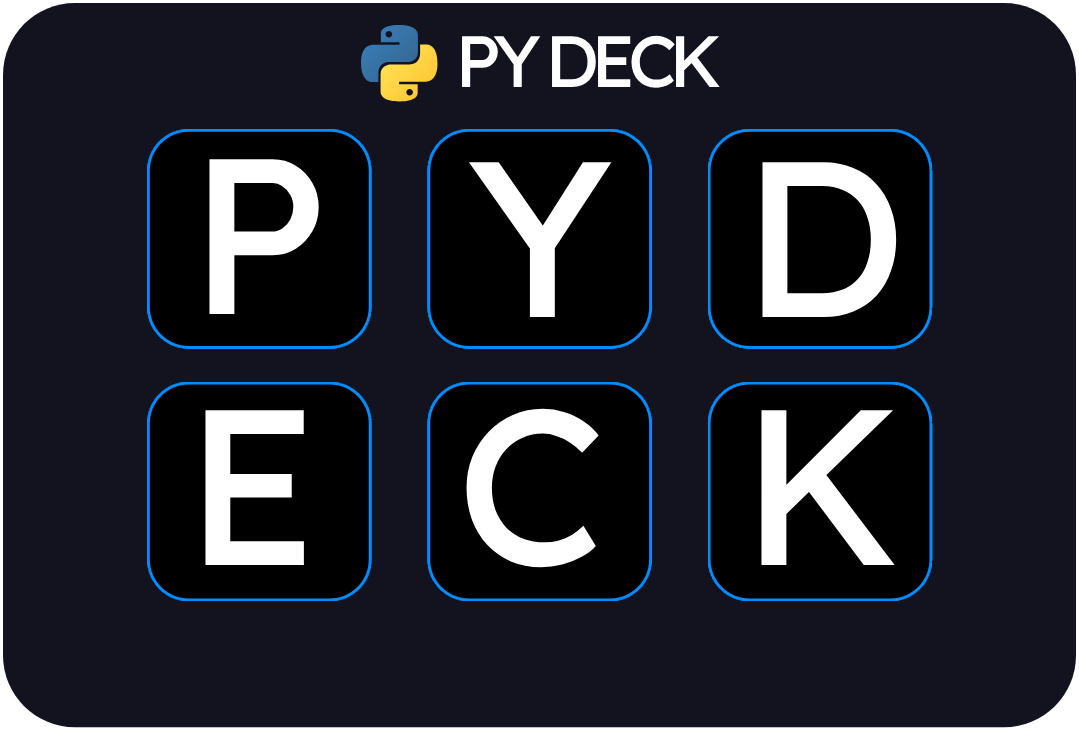
<style>
.page{position:relative;width:1079px;height:730px;background:#13131f}
.page>*{position:absolute;margin:0}
.t1{font:72.4px "LexendDeca-Regular_421.000wght";letter-spacing:-0.111em;color:#ffffff}
.t2{font:221px "LexendDeca-Regular_421.000wght";letter-spacing:-0.111em;color:#ffffff}
</style>
<div class="page">
<p class="t1" style="left:462px;top:35px;width:258px;height:53px">PY DECK</p>
<p class="t2" style="left:209px;top:159px;width:110px;height:155px">P</p>
<p class="t2" style="left:469px;top:162px;width:143px;height:155px">Y</p>
<p class="t2" style="left:762px;top:162px;width:135px;height:155px">D</p>
<p class="t2" style="left:205px;top:410px;width:99px;height:155px">E</p>
<p class="t2" style="left:466px;top:408px;width:133px;height:160px">C</p>
<p class="t2" style="left:761px;top:410px;width:134px;height:155px">K</p>
</div>
